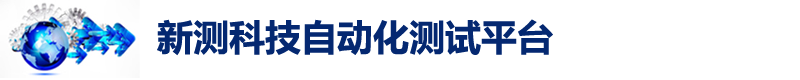
<style>
.page{position:relative;width:800px;height:80px;background:#ffffff}
.page>*{position:absolute;margin:0}
.t1{font:36px "MicrosoftYaHei-Bold";color:#042871}
</style>
<div class="page">
<p class="t1" style="left:157px;top:19px;width:396px;height:37px">新测科技自动化测试平台</p>
</div>
